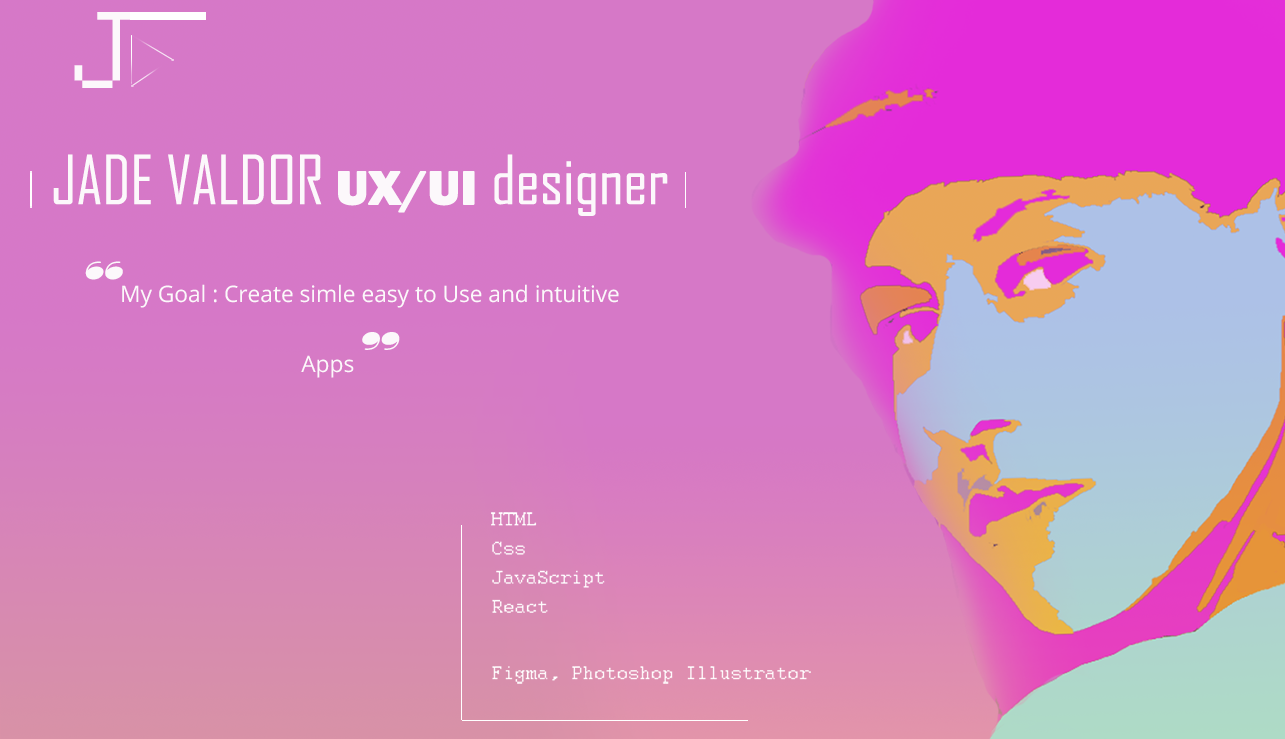
<style>
.page{position:relative;width:1285px;height:739px;background:#d678c7}
.page>*{position:absolute;margin:0}
.t1{font:64.7px "AgencyFB-Reg";color:#fcf8fb}
.t2{font:48.6px "FranklinGothic-Heavy";color:#fcf8fb;font-weight:bold}
.t3{font:22.7px/4.9px "OpenSans";color:#fcf8fb}
.t4{font:58.3px "Broadway";color:#fcf8fb;font-style:italic}
</style>
<div class="page">
<p class="t1" style="left:53px;top:154px;width:615px;height:62px">JADE VALDOR <span class="t2">UX/UI </span>designer</p>
<p class="t3" style="left:85px;top:261px;width:534px;height:117px;text-align:center"><span class="t4">“</span>My Goal : Create simle easy to Use and intuitive Apps<span class="t4">”</span></p>
</div>
